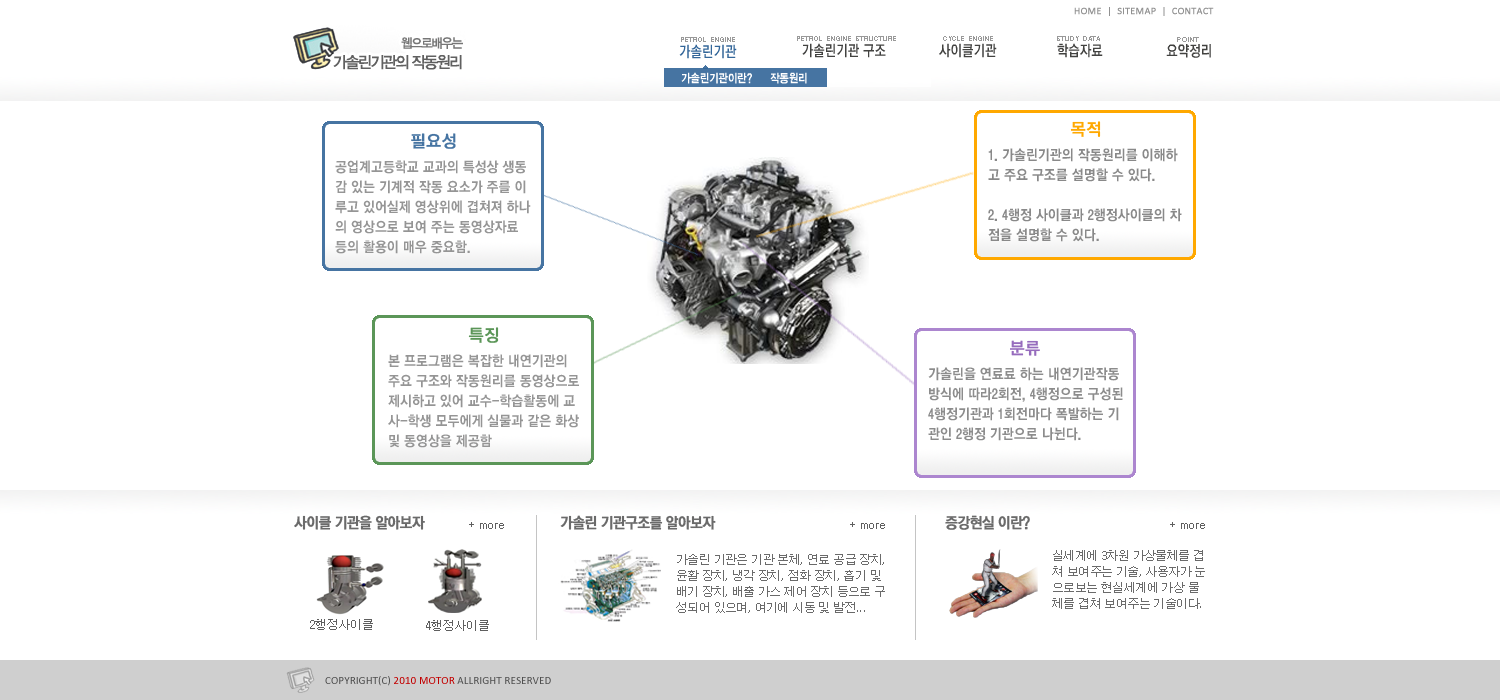
<style>
.page{position:relative;width:1500px;height:700px;background:#ffffff}
.page>*{position:absolute;margin:0}
.t1{font:10px "Calibri";letter-spacing:0.01em;color:#919191;text-transform:uppercase;font-weight:bold}
.t2{font:17px "YGO135";letter-spacing:-0.05em;color:#ffa800;font-weight:bold;scale:0.93 1}
.t3{font:17px "YGO135";letter-spacing:-0.05em;color:#4674a2;font-weight:bold;scale:0.93 1}
.t4{font:14px/20px "YGO550";color:#898989;scale:0.95 1}
.t5{font:14px/20px "YGO550";color:#959595;scale:0.95 1}
.t6{font:17px "YGO135";letter-spacing:-0.05em;color:#5b9658;font-weight:bold;scale:0.93 1}
.t7{font:17px "YGO135";letter-spacing:-0.05em;color:#966bbd;font-weight:bold;scale:0.93 1}
.t8{font:14px/20px "YGO550";color:#8c8c8c;scale:0.95 1}
.t9{font:15px "YGO540";letter-spacing:-0.05em;color:#6a6a6a;font-weight:bold;scale:0.93 1}
.t10{font:11px "Dotum";letter-spacing:-0.02em;color:#5f5f5f}
.t11{font:12px/16px "Dotum";letter-spacing:-0.05em;color:#6a6a6a}
.t12{font:12px "Dotum";letter-spacing:-0.02em;color:#5f5f5f}
.t13{font:11px "Calibri";letter-spacing:0.01em;color:#4f4f4f;text-transform:uppercase}
.t14{font:11px "Calibri";letter-spacing:0.01em;color:#c20000;text-transform:uppercase}
</style>
<div class="page">
<p class="t1" style="left:1074px;top:7px;width:140px;height:9px">HOME  |  SITEMAP  |  CONTACT</p>
<p class="t2" style="left:1070px;top:121px;width:31px;height:16px">목적</p>
<p class="t3" style="left:411px;top:133px;width:45px;height:16px">필요성</p>
<p class="t4" style="left:988px;top:148px;width:194px;height:94px">1. 가솔린기관의 작동원리를 이해하<br>고 주요 구조를 설명할 수 있다.<br><br>2. 4행정 사이클과 2행정사이클의 차<br>점을 설명할 수 있다.</p>
<p class="t5" style="left:335px;top:160px;width:196px;height:94px">공업계고등학교 교과의 특성상 생동<br>감 있는 기계적 작동 요소가 주를 이<br>루고 있어실제 영상위에 겹쳐져 하나<br>의 영상으로 보여 주는 동영상자료 <br>등의 활용이 매우 중요함.</p>
<p class="t6" style="left:468px;top:327px;width:31px;height:16px">특징</p>
<p class="t7" style="left:1010px;top:340px;width:30px;height:16px">분류</p>
<p class="t5" style="left:388px;top:354px;width:191px;height:94px">본 프로그램은 복잡한 내연기관의 <br>주요 구조와 작동원리를 동영상으로 <br>제시하고 있어 교수-학습활동에 교<br>사-학생 모두에게 실물과 같은 화상 <br>및 동영상을 제공함</p>
<p class="t8" style="left:928px;top:367px;width:195px;height:74px">가솔린을 연료료 하는 내연기관작동<br>방식에 따라2회전, 4행정으로 구성된 <br>4행정기관과 1회전마다 폭발하는 기<br>관인 2행정 기관으로 나뉜다.</p>
<p class="t9" style="left:294px;top:515px;width:131px;height:15px">사이클 기관을 알아보자</p>
<p class="t9" style="left:560px;top:515px;width:156px;height:15px">가솔린 기관구조를 알아보자</p>
<p class="t9" style="left:945px;top:515px;width:85px;height:15px">증강현실 이란?</p>
<p class="t10" style="left:469px;top:522px;width:35px;height:7px">+ more</p>
<p class="t10" style="left:850px;top:522px;width:35px;height:7px">+ more</p>
<p class="t10" style="left:1170px;top:522px;width:35px;height:7px">+ more</p>
<p class="t11" style="left:676px;top:554px;width:209px;height:59px">가솔린 기관은 기관 본체, 연료 공급 장치, <br>윤활 장치, 냉각 장치, 점화 장치, 흡기 및 <br>배기 장치, 배출 가스 제어 장치 등으로 구<br>성되어 있으며, 여기에 시동 및 발전...</p>
<p class="t11" style="left:1052px;top:550px;width:153px;height:59px">실세계에 3차원 가상물체를 겹<br>쳐 보여주는 기술, 사용자가 눈<br>으로보는 현실세계에 가상 물<br>체를 겹쳐 보여주는 기술이다.</p>
<p class="t12" style="left:310px;top:619px;width:63px;height:11px">2행정사이클</p>
<p class="t12" style="left:426px;top:620px;width:63px;height:11px">4행정사이클</p>
<p class="t13" style="left:325px;top:676px;width:226px;height:10px">copyright(c) <span class="t14">2010 motor </span>allright reserved</p>
</div>
